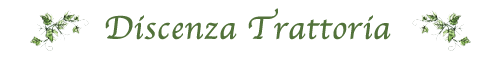
<style>
.page{position:relative;width:500px;height:60px;background:#ffffff}
.page>*{position:absolute;margin:0}
.t1{font:33.3px "Apple-Chancery";color:#52723a;font-weight:bold}
</style>
<div class="page">
<p class="t1" style="left:105px;top:8px;width:286px;height:32px">Discenza Trattoria</p>
</div>
